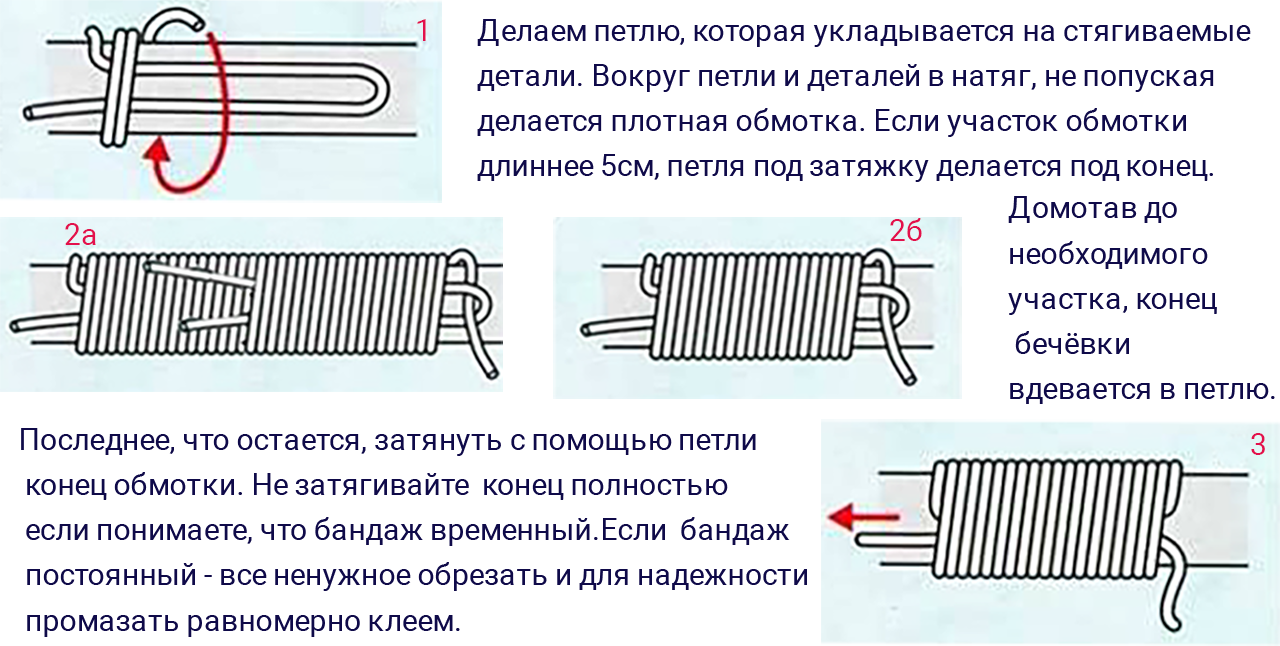
<style>
.page{position:relative;width:1280px;height:646px;background:#ffffff}
.page>*{position:absolute;margin:0}
.t1{font:30.1px "Roboto-Regular";color:#e3104c}
.t2{font:30.1px/45.2px "Roboto-Regular";color:#0f0a49}
.t3{font:30.1px/137.8px "Roboto-Regular";color:#0f0a49}
.t4{font:30.1px/137.8px "Roboto-Regular";color:#e3104c}
</style>
<div class="page">
<p class="t1" style="left:417px;top:19px;width:9px;height:22px">1</p>
<p class="t2" style="left:477px;top:19px;width:774px;height:163px"><span class="t3">Делаем петлю, которая укладывается на стягиваемые</span><br>детали. Вокруг петли и деталей в натяг, не попуская <br>делается плотная обмотка. Если участок обмотки <br>длиннее 5см, петля под затяжку делается под конец.<br><span class="t4"></span></p>
<p class="t2" style="left:1008px;top:196px;width:267px;height:208px">Домотав до <br>необходимого<br>участка, конец<br> бечёвки <br>вдевается в петлю.</p>
<p class="t1" style="left:890px;top:218px;width:32px;height:23px">2б</p>
<p class="t1" style="left:65px;top:223px;width:31px;height:22px">2а</p>
<p class="t2" style="left:21px;top:428px;width:786px;height:209px">Последнее, что остается, затянуть с помощью петли<br> конец обмотки. Не затягивайте  конец полностью<br> если понимаете, что бандаж временный.Если  бандаж<br> постоянный - все ненужное обрезать и для надежности<br> промазать равномерно клеем.</p>
<p class="t1" style="left:1251px;top:433px;width:14px;height:22px">3</p>
</div>
